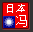
<style>
.page{position:relative;width:33px;height:32px;background:#f20000}
.page>*{position:absolute;margin:0}
.t1{font:10.4px "SimSun";color:#ffffff}
.t2{font:11.7px "SimSun";color:#ffffff}
</style>
<div class="page">
<p class="t1" style="left:7px;top:4px;width:18px;height:9px">日本</p>
<p class="t2" style="left:16px;top:15px;width:11px;height:12px">冯</p>
</div>
